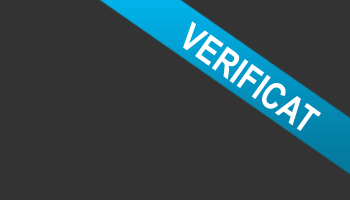
<style>
.page{position:relative;width:350px;height:200px;background:#333333}
.page>*{position:absolute;margin:0}
.t1{font:37.2px "ArialNarrow-Bold";color:#ffffff}
</style>
<div class="page">
<p class="t1" style="left:183px;top:21px;width:138px;height:110px;rotate:35deg">VERIFICAT</p>
</div>
